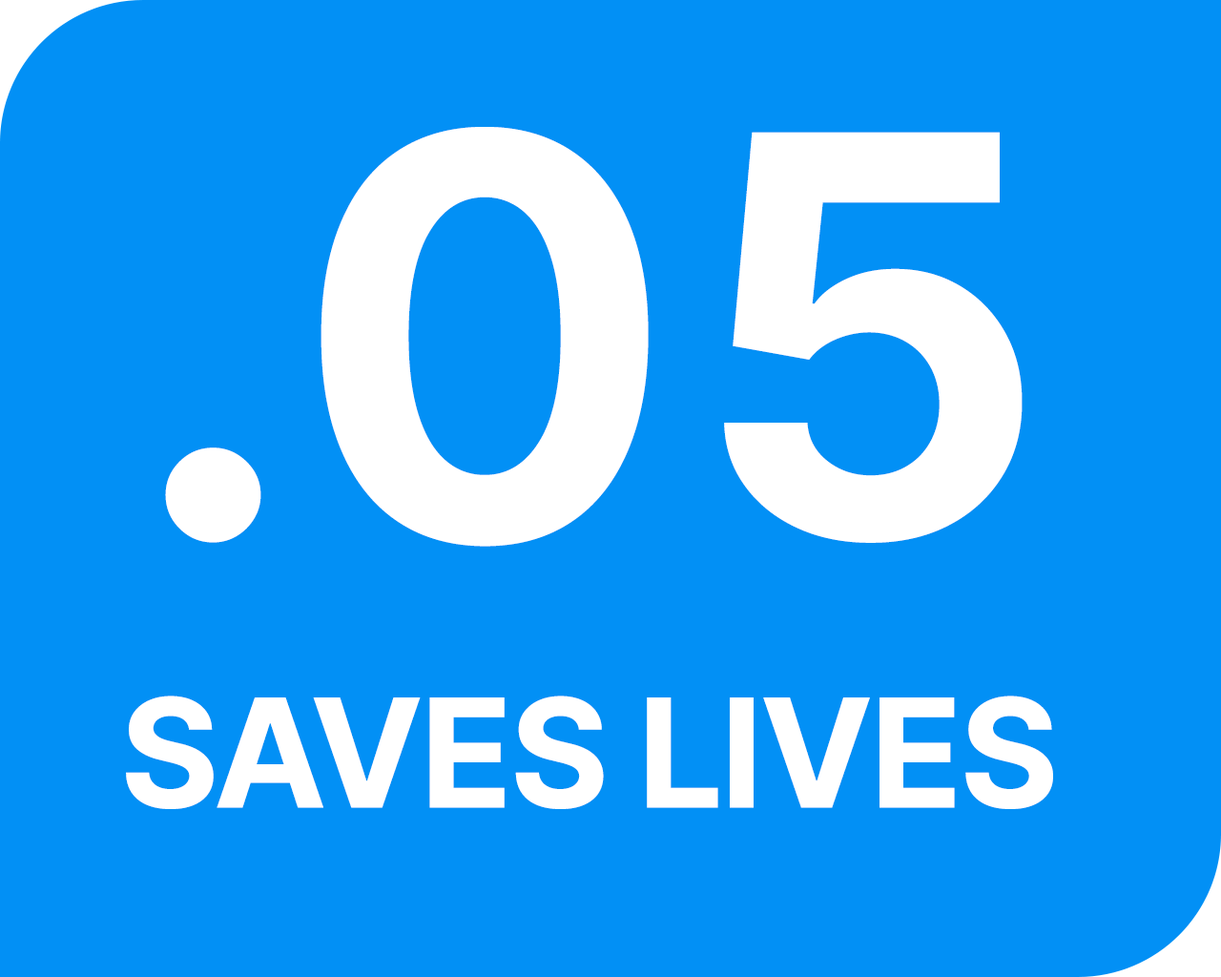
<style>
.page{position:relative;width:1221px;height:977px;background:#0290f5}
.page>*{position:absolute;margin:0}
.t1{font:151px/270.2px "Inter_713.000wght";letter-spacing:-0.02em;color:#ffffff}
.t2{font:556.4px/270.2px "Inter-Bold";letter-spacing:0.025em;color:#ffffff}
</style>
<div class="page">
<p class="t1" style="left:126px;top:127px;width:927px;height:682px;text-align:center"><span class="t2">.05<br></span>SAVES LIVES</p>
</div>
